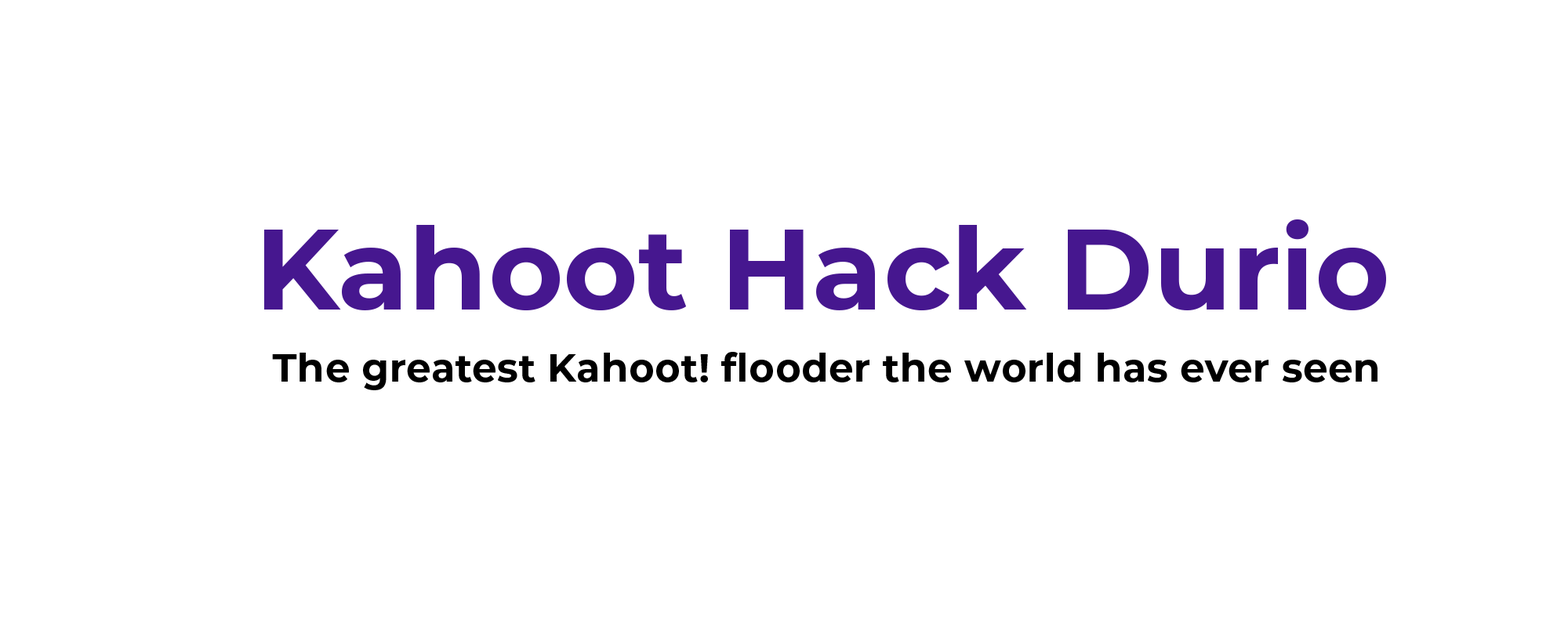
<style>
.page{position:relative;width:1568px;height:641px;background:#ffffff}
.page>*{position:absolute;margin:0}
.t1{font:114.3px "Montserrat-Bold";color:#46178f}
.t2{font:39.2px "Montserrat-Bold";letter-spacing:0.01em;color:#000000}
</style>
<div class="page">
<p class="t1" style="left:264px;top:220px;width:1122px;height:91px">Kahoot Hack Durio</p>
<p class="t2" style="left:272px;top:352px;width:1105px;height:38px">The greatest Kahoot! flooder the world has ever seen</p>
</div>
